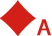
<style>
.page{position:relative;width:52px;height:36px;background:#ffffff}
.page>*{position:absolute;margin:0}
.t1{font:23.4px "MyriadPro-Regular";letter-spacing:-0.1em;color:#d22018;font-weight:bold}
</style>
<div class="page">
<p class="t1" style="left:37px;top:19px;width:14px;height:17px">A</p>
</div>
